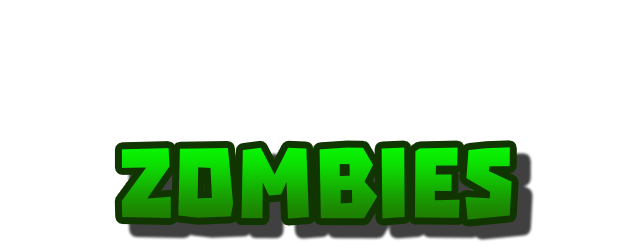
<style>
.page{position:relative;width:622px;height:246px;background:#ffffff}
.page>*{position:absolute;margin:0}
.t1{font:112.5px "Millennia1"}
</style>
<div class="page">
<p class="t1" style="left:121px;top:147px;width:391px;height:73px">Zombies</p>
</div>
